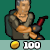
<style>
.page{position:relative;width:50px;height:50px;background:#157155}
.page>*{position:absolute;margin:0}
.t1{font:10px "MFWenYan_Noncommercial-Regular";letter-spacing:-0.06em;color:#ffffff}
</style>
<div class="page">
<p class="t1" style="left:24px;top:42px;width:16px;height:7px">100</p>
</div>
